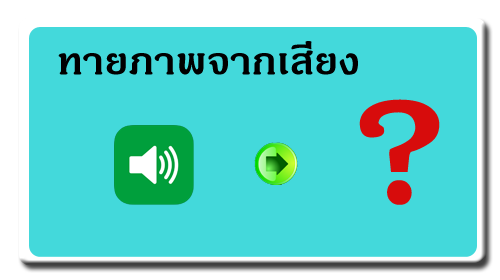
<style>
.page{position:relative;width:500px;height:280px;background:#43d9db}
.page>*{position:absolute;margin:0}
.t1{font:53.1px "JasmineUPCBold";color:#000000}
.t2{font:244.3px "JasmineUPCBold";color:#d70c0c}
</style>
<div class="page">
<p class="t1" style="left:58px;top:41px;width:300px;height:34px">ทายภาพจากเสียง</p>
<p class="t2" style="left:359px;top:99px;width:81px;height:106px">?</p>
</div>
